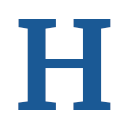
<style>
.page{position:relative;width:128px;height:128px;background:#ffffff}
.page>*{position:absolute;margin:0}
.t1{font:123px "Merriweather-Bold";color:#1a5995}
</style>
<div class="page">
<p class="t1" style="left:18px;top:19px;width:93px;height:91px">H</p>
</div>
